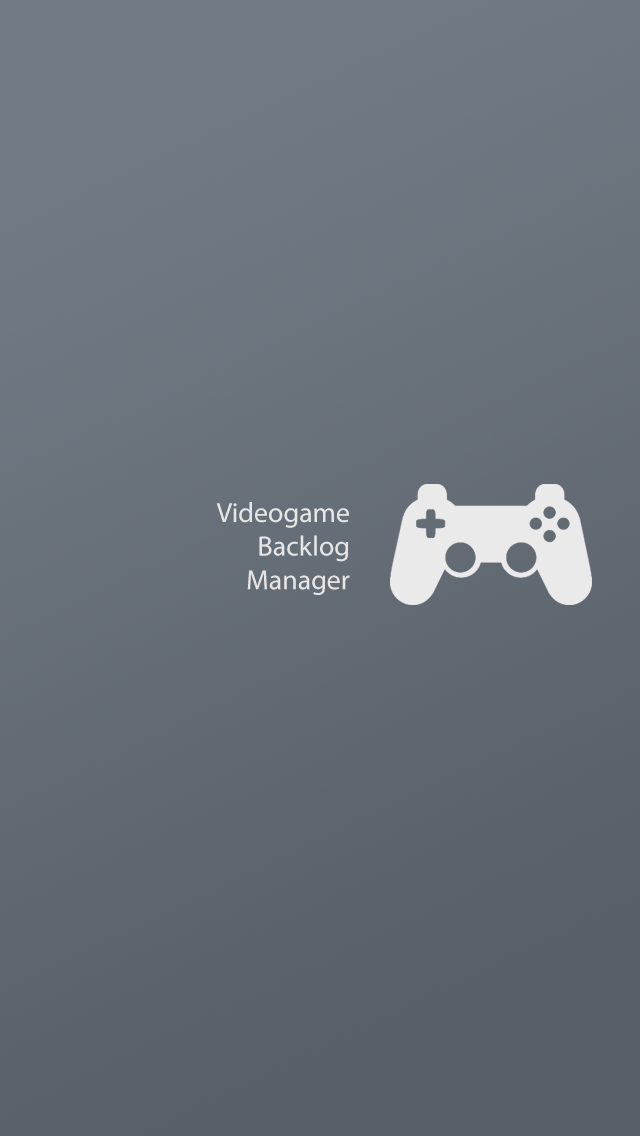
<style>
.page{position:relative;width:640px;height:1136px}
.page>*{position:absolute;margin:0}
.t1{font:28px "MyriadPro-Regular";color:#e6e6e6}
</style>
<div class="page">
<p class="t1" style="left:216px;top:502px;width:134px;height:93px;text-align:right">Videogame<br>Backlog<br>Manager</p>
</div>
